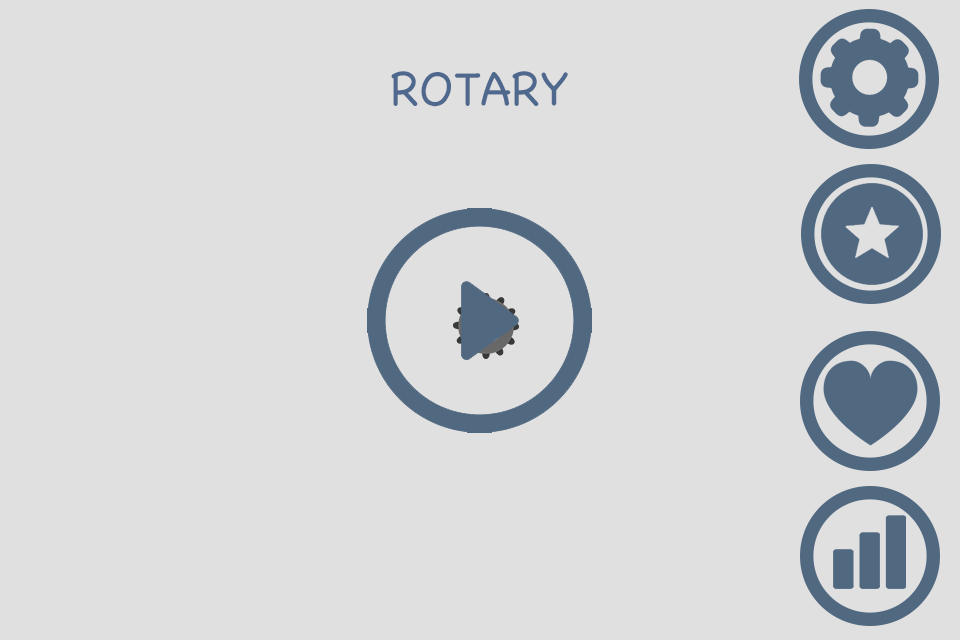
<style>
.page{position:relative;width:960px;height:640px;background:#e0e0e0}
.page>*{position:absolute;margin:0}
.t1{font:48px "Chalkboard";color:#4f698e;text-transform:uppercase}
</style>
<div class="page">
<p class="t1" style="left:391px;top:71px;width:177px;height:36px">Rotary</p>
</div>
